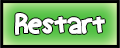
<style>
.page{position:relative;width:120px;height:48px}
.page>*{position:absolute;margin:0}
.t1{font:32px "Animated";color:#ffffff}
</style>
<div class="page">
<p class="t1" style="left:15px;top:13px;width:90px;height:22px">Restart</p>
</div>
